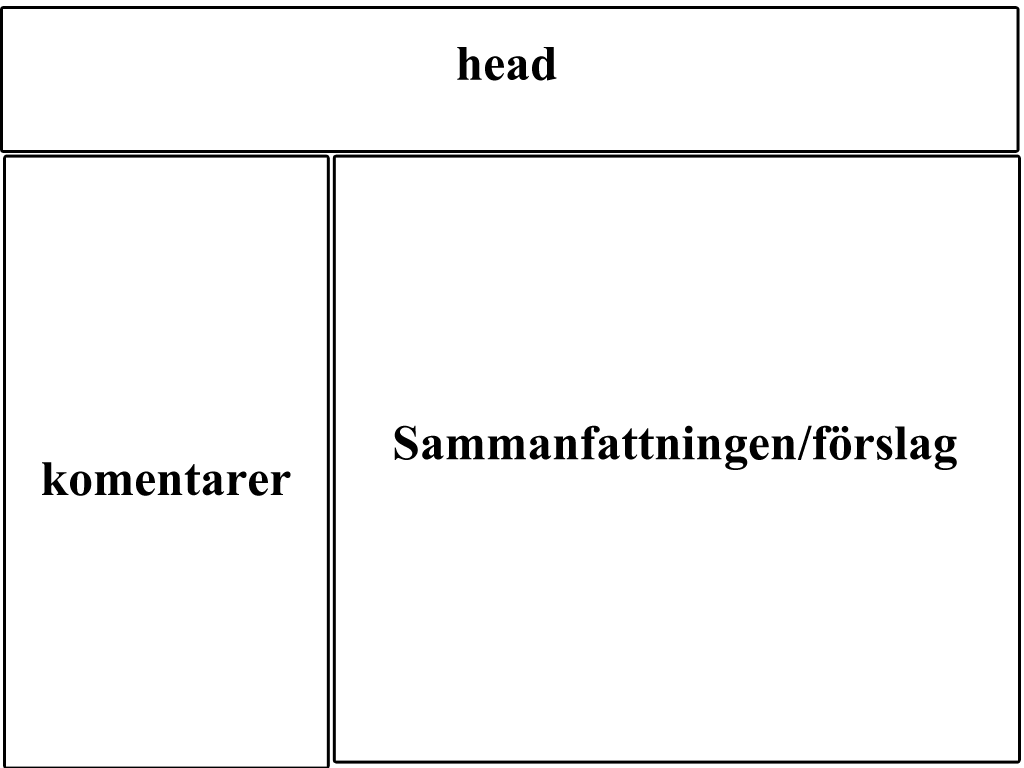
<style>
.page{position:relative;width:1024px;height:768px;background:#ffffff}
.page>*{position:absolute;margin:0}
.t1{font:60px "ShonarBangla-Bold";color:#000000}
</style>
<div class="page">
<p class="t1" style="left:457px;top:47px;width:100px;height:34px">head</p>
<p class="t1" style="left:394px;top:425px;width:563px;height:45px">Sammanfattningen/förslag</p>
<p class="t1" style="left:42px;top:462px;width:249px;height:34px">komentarer</p>
</div>
